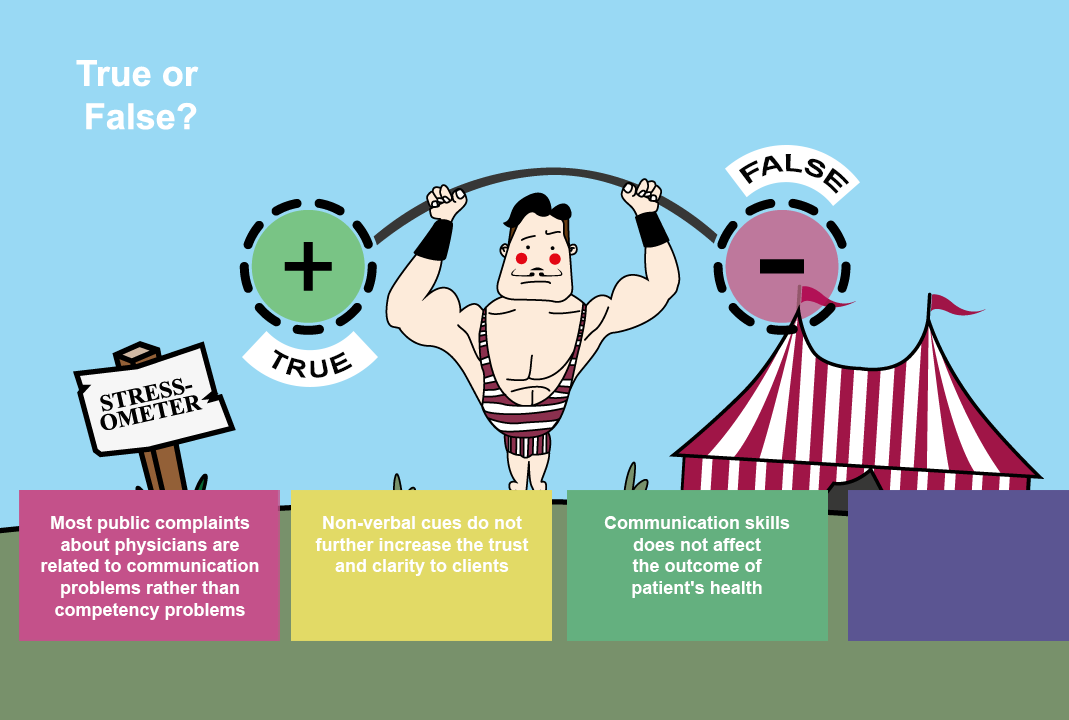
<style>
.page{position:relative;width:1069px;height:720px;background:#99d9f4}
.page>*{position:absolute;margin:0}
.t1{font:36px "Arial-BoldMT";color:#ffffff}
.t2{font:24px "Arial-BoldMT";color:#030303}
.t3{font:18px "Arial-BoldMT";color:#ffffff}
</style>
<div class="page">
<p class="t1" style="left:76px;top:60px;width:123px;height:70px;text-align:right">True or<br>False?</p>
<p class="t2" style="left:739px;top:154px;width:110px;height:40px;rotate:6deg">FALSE</p>
<p class="t2" style="left:271px;top:349px;width:82px;height:29px;rotate:2deg">TRUE</p>
<p class="t3" style="left:41px;top:516px;width:218px;height:104px;text-align:center">Most public complaints<br>about physicians are<br>related to communication<br>problems rather than<br>competency problems</p>
<p class="t3" style="left:315px;top:516px;width:214px;height:60px;text-align:center">Non-verbal cues do not<br>further increase the trust<br>and clarity to clients</p>
<p class="t3" style="left:604px;top:516px;width:186px;height:82px;text-align:center">Communication skills<br>does not affect<br>the outcome of<br>patient's health</p>
</div>
